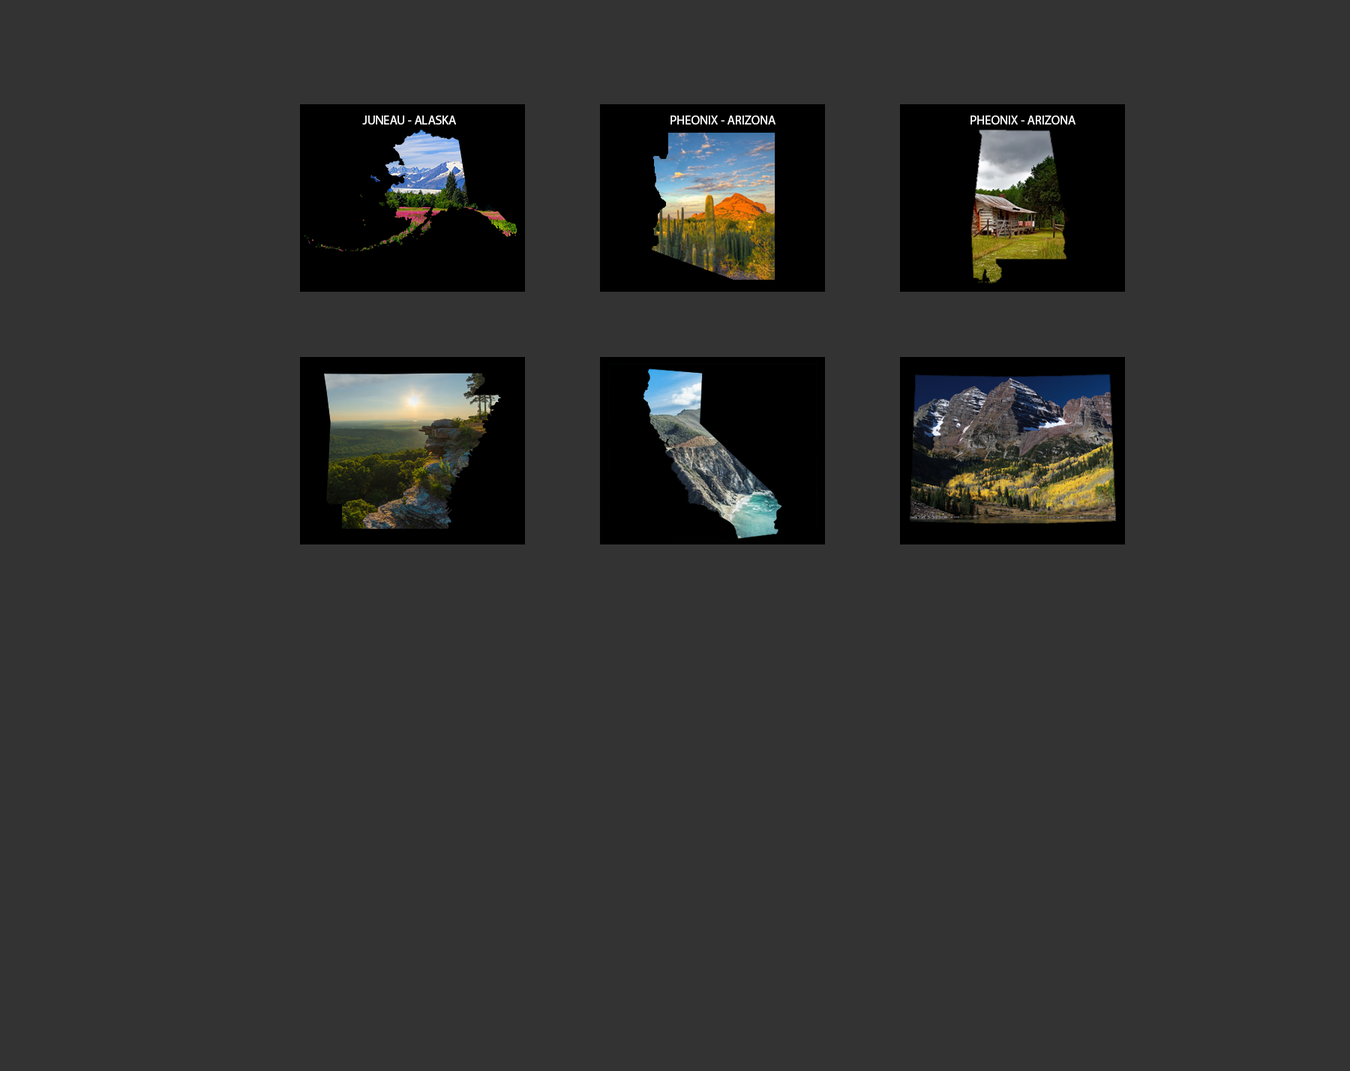
<style>
.page{position:relative;width:1350px;height:1071px;background:#333333}
.page>*{position:absolute;margin:0}
.t1{font:9px "MyriadPro-Regular";color:#ffffff}
</style>
<div class="page">
<p class="t1" style="left:362px;top:116px;width:94px;height:8px">JUNEAU - ALASKA</p>
<p class="t1" style="left:670px;top:116px;width:106px;height:8px">PHEONIX - ARIZONA</p>
<p class="t1" style="left:970px;top:116px;width:106px;height:8px">PHEONIX - ARIZONA</p>
</div>
